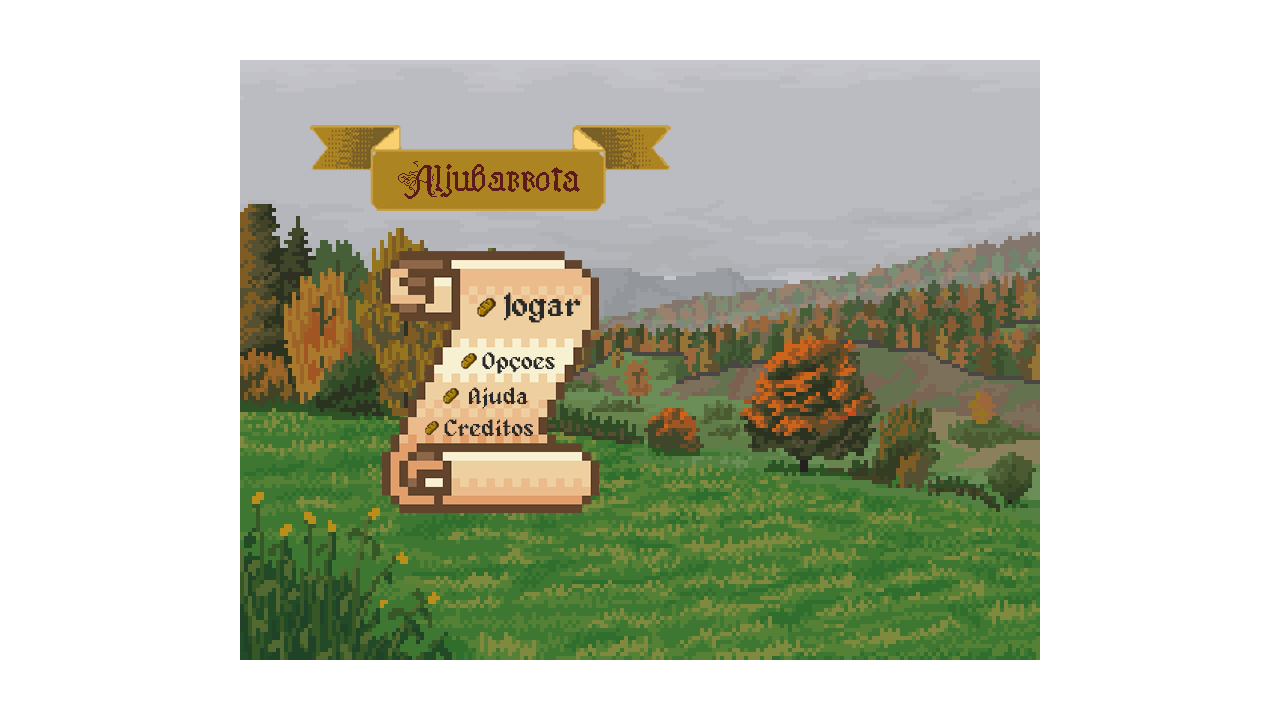
<style>
.page{position:relative;width:1280px;height:720px;background:#ffffff}
.page>*{position:absolute;margin:0}
.t1{font:34px "Alagard";color:#292929}
.t2{font:24px "Alagard";color:#292929}
</style>
<div class="page">
<p class="t1" style="left:504px;top:292px;width:76px;height:31px">Jogar</p>
<p class="t2" style="left:469px;top:387px;width:59px;height:22px">Ajuda</p>
<p class="t2" style="left:444px;top:419px;width:89px;height:17px">Creditos</p>
</div>
